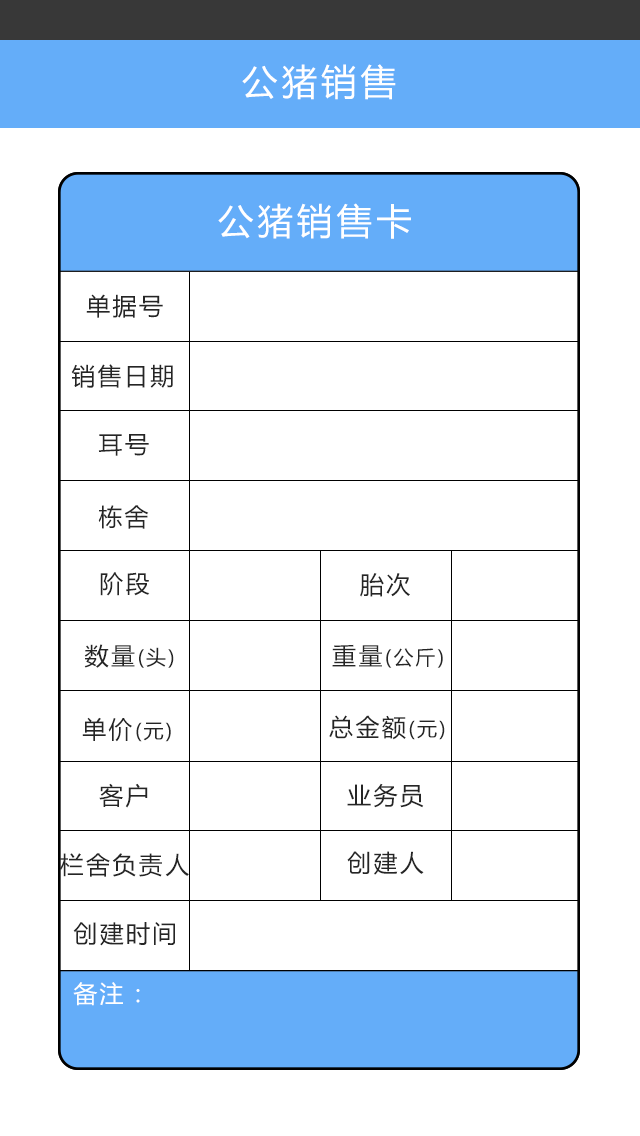
<style>
.page{position:relative;width:640px;height:1136px;background:#ffffff}
.page>*{position:absolute;margin:0}
.t1{font:36px "MicrosoftYaHei";letter-spacing:0.1em;color:#ffffff}
.t2{font:24px "MicrosoftYaHei";letter-spacing:0.1em;color:#252525}
.t3{font:20px "MicrosoftYaHei";letter-spacing:0.1em;color:#252525}
.t4{font:24px "MicrosoftYaHei";letter-spacing:0.1em;color:#ffffff}
</style>
<div class="page">
<p class="t1" style="left:242px;top:64px;width:154px;height:36px">公猪销售</p>
<p class="t1" style="left:218px;top:203px;width:193px;height:36px">公猪销售卡</p>
<p class="t2" style="left:86px;top:294px;width:77px;height:24px">单据号</p>
<p class="t2" style="left:71px;top:364px;width:102px;height:24px">销售日期</p>
<p class="t2" style="left:98px;top:434px;width:51px;height:22px">耳号</p>
<p class="t2" style="left:98px;top:505px;width:51px;height:24px">栋舍</p>
<p class="t2" style="left:100px;top:572px;width:50px;height:24px">阶段</p>
<p class="t2" style="left:360px;top:573px;width:50px;height:24px">胎次</p>
<p class="t3" style="left:84px;top:644px;width:90px;height:24px"><span class="t2">数量</span>(头)</p>
<p class="t3" style="left:332px;top:644px;width:111px;height:24px"><span class="t2">重量</span>(公斤)</p>
<p class="t3" style="left:82px;top:717px;width:89px;height:25px"><span class="t2">单价</span>(元)</p>
<p class="t2" style="left:329px;top:715px;width:116px;height:25px">总金额<span class="t3">(元)</span></p>
<p class="t2" style="left:99px;top:783px;width:49px;height:25px">客户</p>
<p class="t2" style="left:347px;top:783px;width:77px;height:25px">业务员</p>
<p class="t2" style="left:60px;top:853px;width:129px;height:24px">栏舍负责人</p>
<p class="t2" style="left:347px;top:851px;width:77px;height:24px">创建人</p>
<p class="t2" style="left:73px;top:922px;width:102px;height:24px">创建时间</p>
<p class="t4" style="left:73px;top:982px;width:67px;height:24px">备注：</p>
</div>
